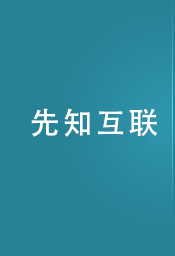
<style>
.page{position:relative;width:175px;height:256px;background:#278296}
.page>*{position:absolute;margin:0}
.t1{font:30px "AdobeHeitiStd-Regular";letter-spacing:0.1em;color:#ffffff}
</style>
<div class="page">
<p class="t1" style="left:31px;top:108px;width:127px;height:29px">先知互联</p>
</div>
